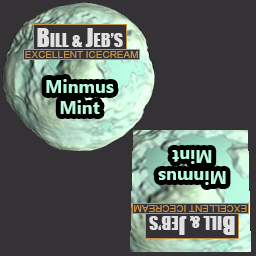
<style>
.page{position:relative;width:256px;height:256px;background:#343235}
.page>*{position:absolute;margin:0}
.t1{font:18px "Impact";color:#e1e1e1}
.t2{font:24px "Impact";color:#e1e1e1}
.t3{font:10px "ArialMT";color:#c3934a}
.t4{font:18px "MicrosoftNewTaiLue-Bold";color:#b7f9de}
</style>
<div class="page">
<p class="t1" style="left:37px;top:28px;width:86px;height:19px"><span class="t2">B</span>ILL &amp; <span class="t2">J</span>EB’S</p>
<p class="t3" style="left:25px;top:51px;width:113px;height:7px">EXCELLENT ICECREAM</p>
<p class="t4" style="left:46px;top:79px;width:68px;height:35px;text-align:center">Minmus<br>Mint</p>
<p class="t4" style="left:158px;top:150px;width:68px;height:35px;text-align:center;rotate:180deg">Minmus<br>Mint</p>
</div>
